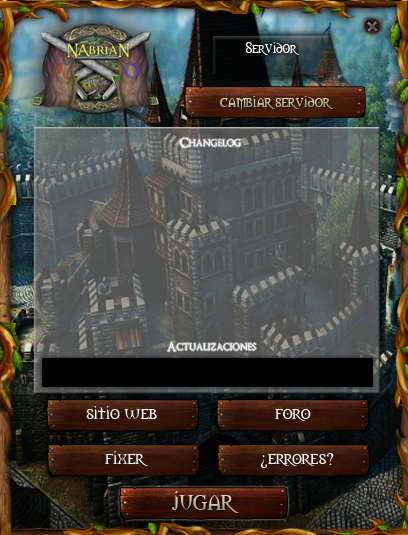
<style>
.page{position:relative;width:408px;height:535px}
.page>*{position:absolute;margin:0}
.t1{font:14px "Morpheus";color:#ffffff}
.t2{font:14.7px "Morpheus";scale:1.05 1}
.t3{font:12px "OptimusPrinceps"}
.t4{font:12px "OptimusPrinceps";color:#ffffff}
.t5{font:16.8px "Morpheus";color:#ffffff;scale:1.09 1}
.t6{font:24.6px "Morpheus";scale:1.08 1}
</style>
<div class="page">
<p class="t1" style="left:245px;top:42px;width:55px;height:13px">Servidor</p>
<p class="t2" style="left:220px;top:96px;width:114px;height:14px">cambiar servidor</p>
<p class="t3" style="left:180px;top:137px;width:61px;height:11px">Changelog</p>
<p class="t4" style="left:167px;top:342px;width:89px;height:10px">Actualizaciones</p>
<p class="t5" style="left:86px;top:406px;width:71px;height:13px">sitio web</p>
<p class="t5" style="left:275px;top:409px;width:36px;height:12px">foro</p>
<p class="t5" style="left:105px;top:451px;width:43px;height:15px">fixer</p>
<p class="t5" style="left:260px;top:453px;width:74px;height:15px">¿errores?</p>
<p class="t6" style="left:172px;top:491px;width:68px;height:22px">jugar</p>
</div>
